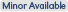
<style>
.page{position:relative;width:68px;height:12px;background:#e3e3e3}
.page>*{position:absolute;margin:0}
.t1{font:10px "URWGroteskT-Lig";color:#2f4973}
</style>
<div class="page">
<p class="t1" style="left:2px;top:1px;width:64px;height:8px">Minor Available</p>
</div>
